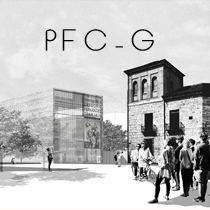
<style>
.page{position:relative;width:210px;height:210px}
.page>*{position:absolute;margin:0}
.t1{font:27px "SusannaRegular";letter-spacing:0.18em;color:#040000;font-weight:bold}
</style>
<div class="page">
<p class="t1" style="left:45px;top:29px;width:109px;height:22px">PFC-G</p>
</div>
